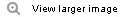
<style>
.page{position:relative;width:128px;height:17px;background:#ffffff}
.page>*{position:absolute;margin:0}
.t1{font:10px "ArialMT";color:#000000}
</style>
<div class="page">
<p class="t1" style="left:32px;top:5px;width:85px;height:9px">View larger image</p>
</div>
